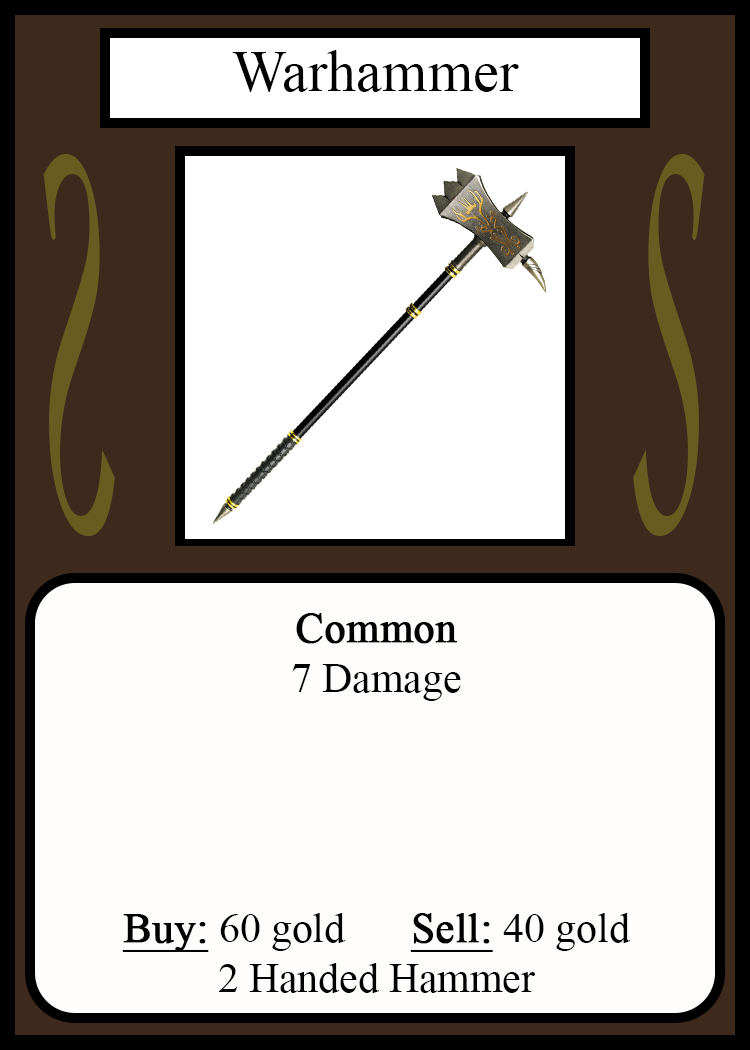
<style>
.page{position:relative;width:750px;height:1050px;background:#fffcfc}
.page>*{position:absolute;margin:0}
.t1{font:58.3px "TimesNewRomanPSMT";color:#010101}
.t2{font:548.5px "Apple-Chancery";color:#6a5c21;scale:0.27 1}
.t3{font:548.2px "Apple-Chancery";color:#6a5c21;scale:0.27 1}
.t4{font:41.7px "TimesNewRomanPSMT";color:#000000}
.t5{font:41.7px "TimesNewRomanPSMT";color:#000000;font-weight:bold}
.t6{font:41.7px "TimesNewRomanPSMT";color:#000000;font-weight:bold;text-decoration:underline}
</style>
<div class="page">
<p class="t1" style="left:232px;top:50px;width:287px;height:42px">Warhammer</p>
<p class="t2" style="left:43px;top:154px;width:72px;height:382px;rotate:180deg">S</p>
<p class="t3" style="left:633px;top:154px;width:72px;height:382px">S</p>
<p class="t4" style="left:122px;top:613px;width:509px;height:380px;text-align:center"><span class="t5">Common<br></span>7 Damage<br><br><br><br><br><span class="t6">Buy:</span> 60 gold   <span class="t6">Sell:</span> 40 gold<br>2 Handed Hammer</p>
</div>
